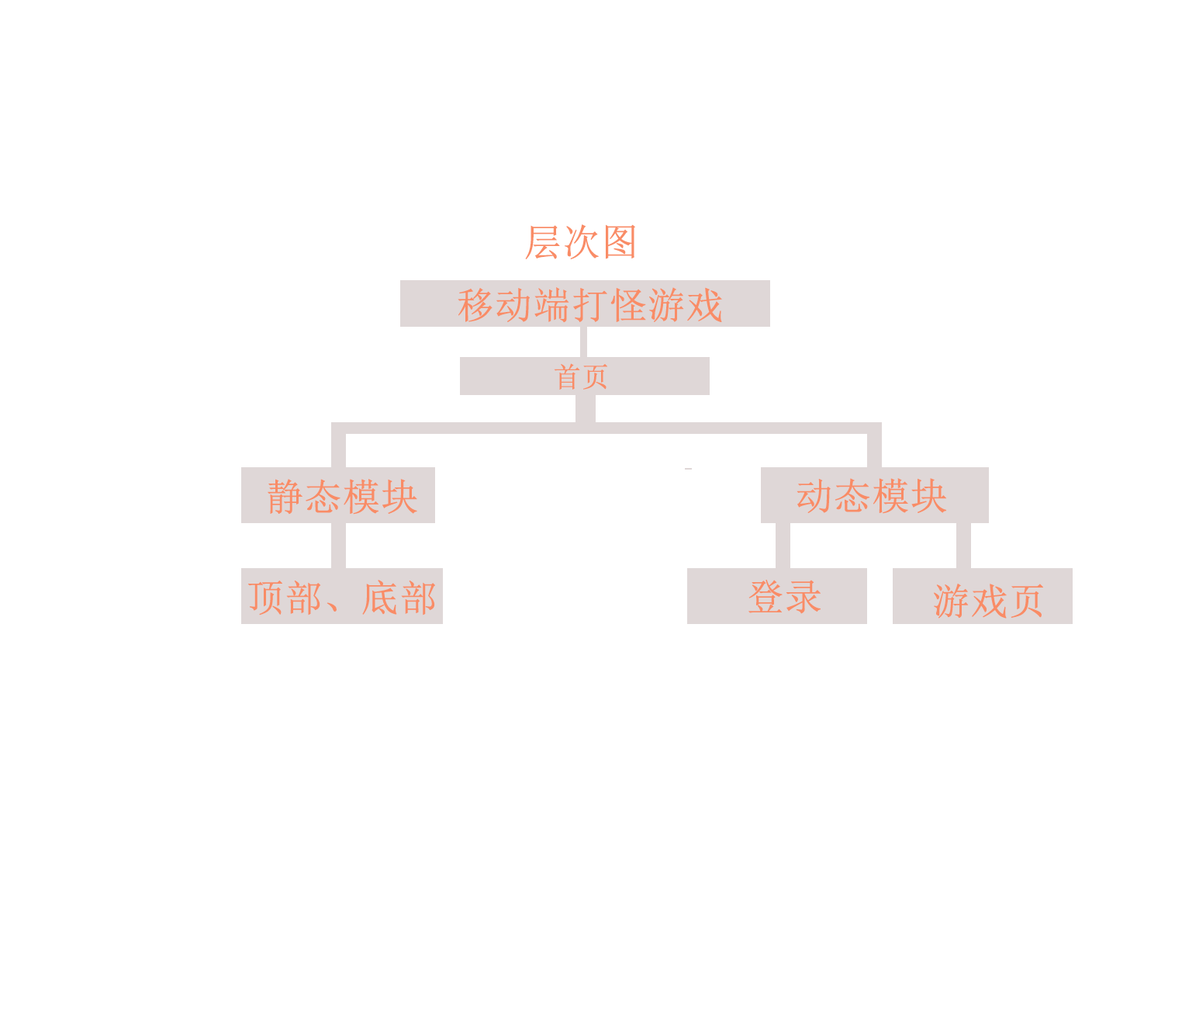
<style>
.page{position:relative;width:1182px;height:1009px;background:#ffffff}
.page>*{position:absolute;margin:0}
.t1{font:37.2px "SimSun";color:#f98c66;text-transform:uppercase;font-weight:bold}
.t2{font:27.9px "SimSun";color:#f98c66;text-transform:uppercase;font-weight:bold}
</style>
<div class="page">
<p class="t1" style="left:525px;top:224px;width:110px;height:35px">层次图</p>
<p class="t1" style="left:458px;top:287px;width:264px;height:36px">移动端打怪游戏</p>
<p class="t2" style="left:554px;top:363px;width:53px;height:26px">首页</p>
<p class="t1" style="left:268px;top:479px;width:149px;height:35px">静态模块</p>
<p class="t1" style="left:797px;top:478px;width:150px;height:36px">动态模块</p>
<p class="t1" style="left:247px;top:580px;width:188px;height:35px">顶部、底部</p>
<p class="t1" style="left:749px;top:580px;width:72px;height:34px">登录</p>
<p class="t1" style="left:934px;top:583px;width:109px;height:35px">游戏页</p>
</div>
